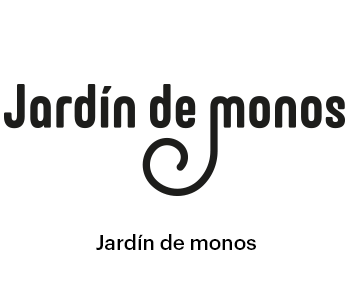
<style>
.page{position:relative;width:350px;height:300px;background:#ffffff}
.page>*{position:absolute;margin:0}
.t1{font:20.6px "Graphik-Medium";color:#000000}
</style>
<div class="page">
<p class="t1" style="left:96px;top:234px;width:160px;height:16px">Jardín de monos</p>
</div>
